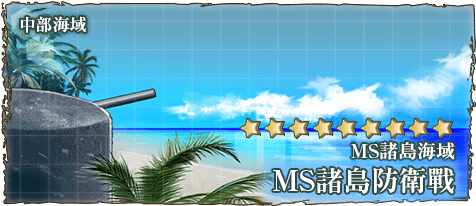
<style>
.page{position:relative;width:476px;height:206px}
.page>*{position:absolute;margin:0}
.t1{font:17px "RyuminPr6N-ExBold";color:#ffffff}
.t2{font:19px "RyuminPro-ExBold";color:#ffffff}
.t3{font:28px "RyuminPro-ExBold";color:#ffffff}
</style>
<div class="page">
<p class="t1" style="left:20px;top:16px;width:66px;height:17px">中部海域</p>
<p class="t2" style="left:351px;top:142px;width:104px;height:18px">MS諸島海域</p>
<p class="t3" style="left:273px;top:167px;width:182px;height:27px">MS諸島防衛戰</p>
</div>
